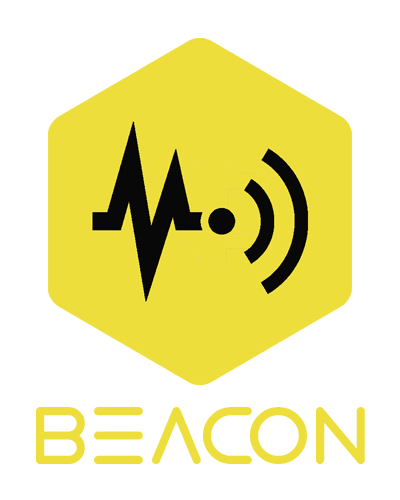
<style>
.page{position:relative;width:400px;height:500px;background:#ffffff}
.page>*{position:absolute;margin:0}
.t1{font:83.3px "ElectroShackle";letter-spacing:0.01em;color:#edde3c}
</style>
<div class="page">
<p class="t1" style="left:36px;top:407px;width:329px;height:57px">Beacon</p>
</div>
